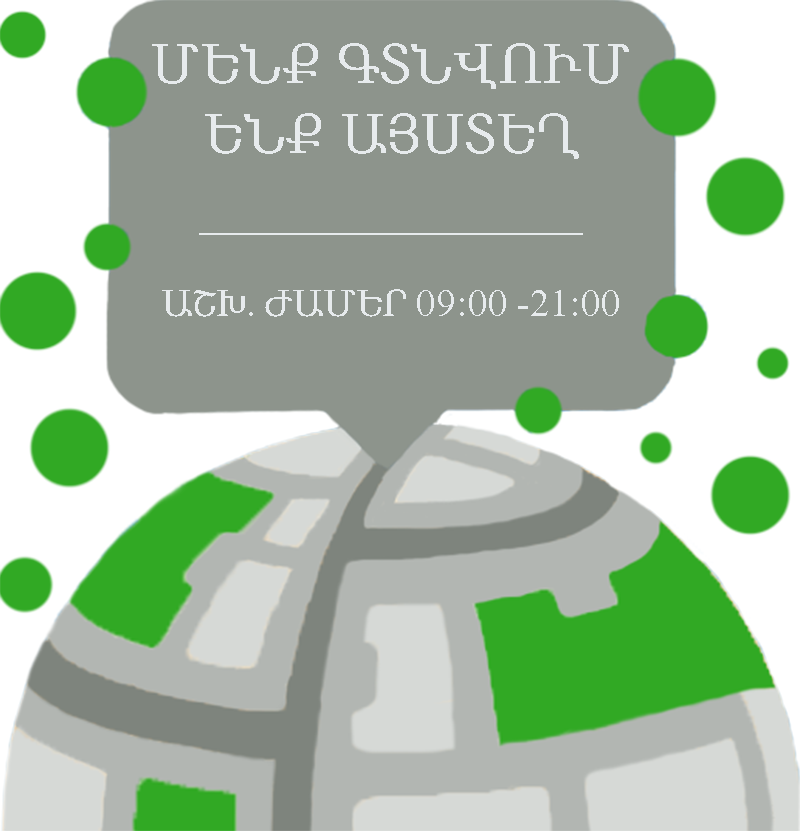
<style>
.page{position:relative;width:800px;height:831px;background:#8d948c}
.page>*{position:absolute;margin:0}
.t1{font:58.1px "Sylfaen";color:#e7ebed}
.t2{font:58.1px "TimesLatArm";color:#e7ebed}
.t3{font:38.8px "Sylfaen";color:#e7ebed}
.t4{font:38.8px "TimesLatArm";color:#e7ebed}
</style>
<div class="page">
<p class="t1" style="left:152px;top:43px;width:477px;height:274px;text-align:center">ՄԵՆՔ ԳՏՆՎՈՒՄ ԵՆՔ ԱՅՍՏԵՂ<span class="t2"><br>_____________<br><br></span><span class="t3">ԱՇԽ</span><span class="t4">. </span><span class="t3">ԺԱՄԵՐ</span><span class="t4"> 09:00 -21:00</span></p>
</div>
